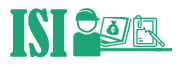
<style>
.page{position:relative;width:182px;height:68px;background:#ffffff}
.page>*{position:absolute;margin:0}
.t1{font:60px "BernardMT-Condensed";color:#1da57a}
</style>
<div class="page">
<p class="t1" style="left:10px;top:8px;width:57px;height:50px">ISI</p>
</div>
